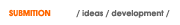
<style>
.page{position:relative;width:180px;height:25px;background:#ffffff}
.page>*{position:absolute;margin:0}
.t1{font:8px "Atlanta-Demi";color:#ff6600}
.t2{font:8px "Atlanta-Demi";color:#666666}
</style>
<div class="page">
<p class="t1" style="left:9px;top:9px;width:42px;height:8px">SUBMITION</p>
<p class="t2" style="left:76px;top:10px;width:94px;height:8px"><span class="t1"> </span>/ ideas / development /</p>
</div>
